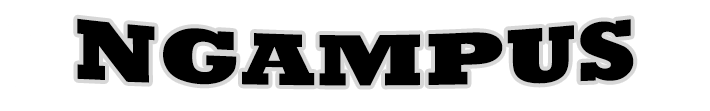
<style>
.page{position:relative;width:710px;height:111px;background:#ffffff}
.page>*{position:absolute;margin:0}
.t1{font:98px "Rockwell-ExtraBold";color:#000000}
</style>
<div class="page">
<p class="t1" style="left:77px;top:18px;width:557px;height:68px">NGAMPUS</p>
</div>
